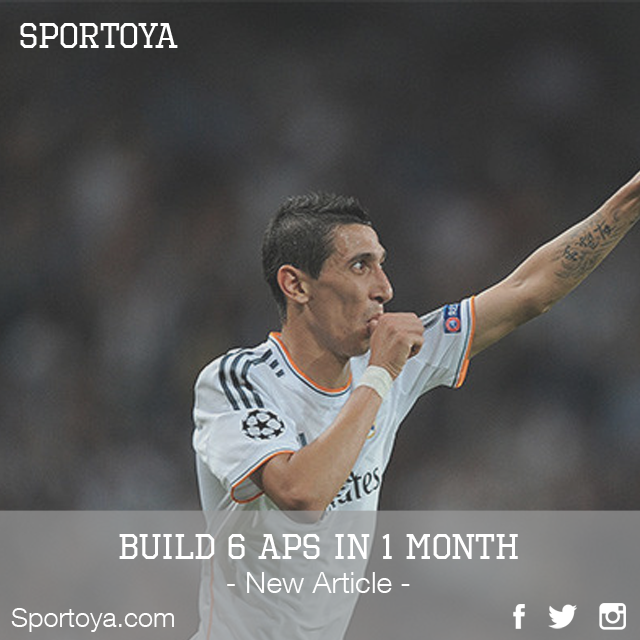
<style>
.page{position:relative;width:640px;height:640px}
.page>*{position:absolute;margin:0}
.t1{font:36px "OctinSportsRg-Regular";color:#ffffff}
.t2{font:30px "HelveticaNeueLTCom-Lt";color:#ffffff}
.t3{font:27px "HelveticaNeueLTCom-Lt";color:#ffffff}
</style>
<div class="page">
<p class="t1" style="left:20px;top:23px;width:158px;height:25px">SPORTOYa</p>
<p class="t1" style="left:119px;top:534px;width:399px;height:25px">BUILD 6 APS IN 1 MONTH</p>
<p class="t2" style="left:227px;top:572px;width:183px;height:21px">- New Article -</p>
<p class="t3" style="left:11px;top:608px;width:163px;height:24px">Sportoya.com</p>
</div>
